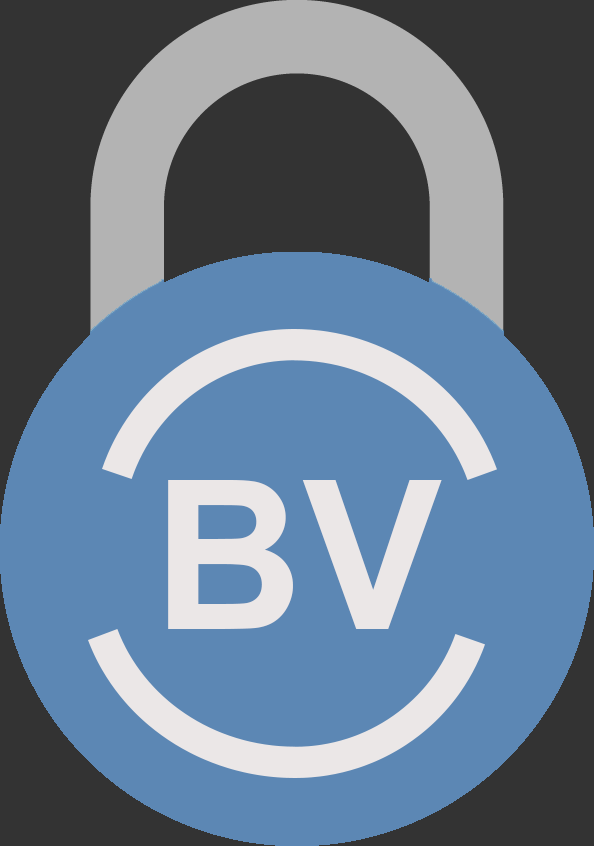
<style>
.page{position:relative;width:594px;height:846px;background:#5c87b4}
.page>*{position:absolute;margin:0}
.t1{font:208.3px "Arial-BoldMT";color:#ebe7e7}
</style>
<div class="page">
<p class="t1" style="left:168px;top:480px;width:274px;height:149px">BV</p>
</div>
